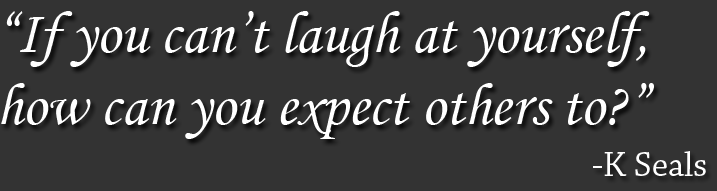
<style>
.page{position:relative;width:717px;height:191px;background:#333333}
.page>*{position:absolute;margin:0}
.t1{font:60px "MonotypeCorsiva";color:#ffffff}
.t2{font:36px "ChaparralPro-Regular";color:#ffffff}
</style>
<div class="page">
<p class="t1" style="left:1px;top:11px;width:653px;height:128px">“If you can’t laugh at yourself, <br>how can you expect others to?”</p>
<p class="t2" style="left:593px;top:151px;width:113px;height:25px">-K Seals</p>
</div>
